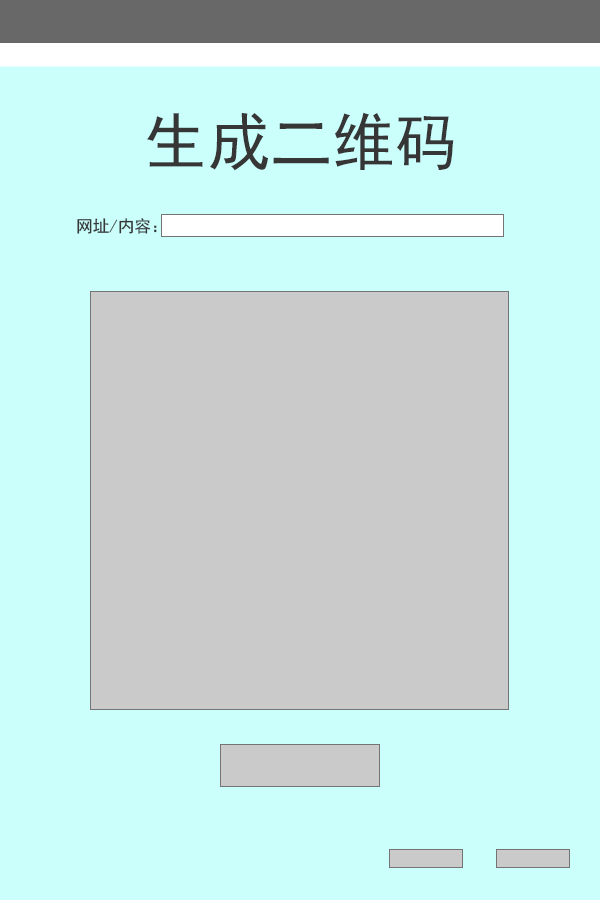
<style>
.page{position:relative;width:600px;height:900px;background:#cbfffc}
.page>*{position:absolute;margin:0}
.t1{font:62.5px "SimHei";color:#363636}
.t2{font:16.7px "SimHei";color:#363636}
</style>
<div class="page">
<p class="t1" style="left:147px;top:112px;width:307px;height:59px">生成二维码</p>
<p class="t2" style="left:77px;top:218px;width:80px;height:16px">网址/内容：</p>
</div>
